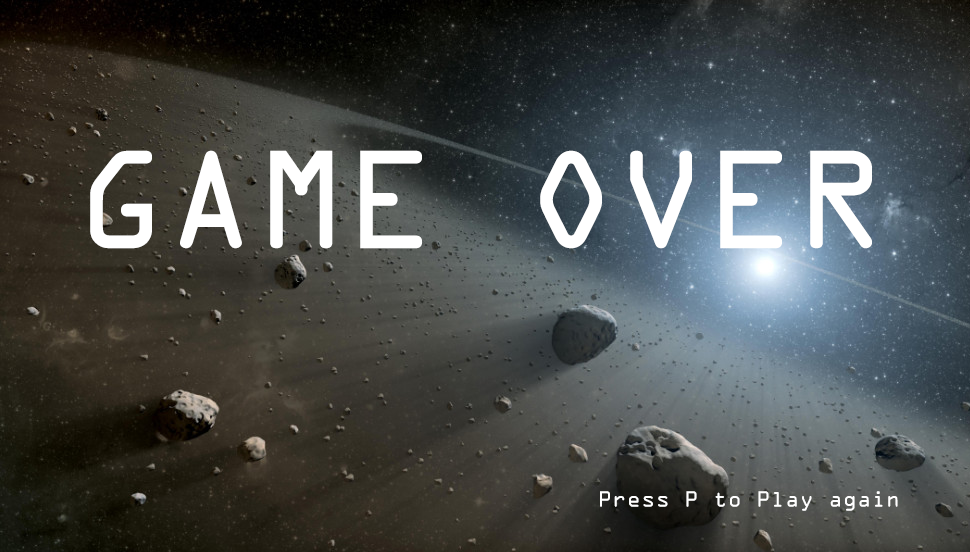
<style>
.page{position:relative;width:970px;height:552px}
.page>*{position:absolute;margin:0}
.t1{font:125px "OCRAStd";color:#ffffff}
.t2{font:20px "OCRAStd";color:#ffffff}
</style>
<div class="page">
<p class="t1" style="left:90px;top:150px;width:782px;height:99px">GAME OVER</p>
<p class="t2" style="left:600px;top:491px;width:298px;height:20px">Press P to Play again</p>
</div>
